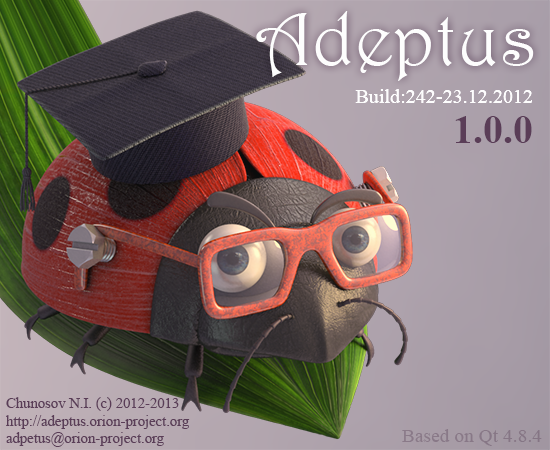
<style>
.page{position:relative;width:550px;height:450px}
.page>*{position:absolute;margin:0}
.t1{font:76.5px "Harrington";color:#ffffff}
.t2{font:20.1px "TimesNewRomanPSMT";color:#ffffff}
.t3{font:40.2px "TimesNewRomanPS-BoldMT";color:#523450}
.t4{font:14.7px "TimesNewRomanPSMT";color:#523450}
</style>
<div class="page">
<p class="t1" style="left:256px;top:11px;width:278px;height:70px">Adeptus</p>
<p class="t2" style="left:355px;top:89px;width:177px;height:14px">Build:242-23.12.2012</p>
<p class="t3" style="left:455px;top:116px;width:77px;height:27px">1.0.0</p>
<p class="t4" style="left:6px;top:397px;width:184px;height:50px">Chunosov N.I. (c) 2012-2013<br>http://adeptus.orion-project.org<br>adpetus@orion-project.org</p>
</div>
